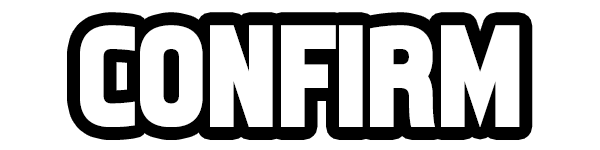
<style>
.page{position:relative;width:600px;height:150px;background:#ffffff}
.page>*{position:absolute;margin:0}
.t1{font:160px "SheSmiles";color:#ffffff}
</style>
<div class="page">
<p class="t1" style="left:80px;top:25px;width:440px;height:102px">confirm</p>
</div>
